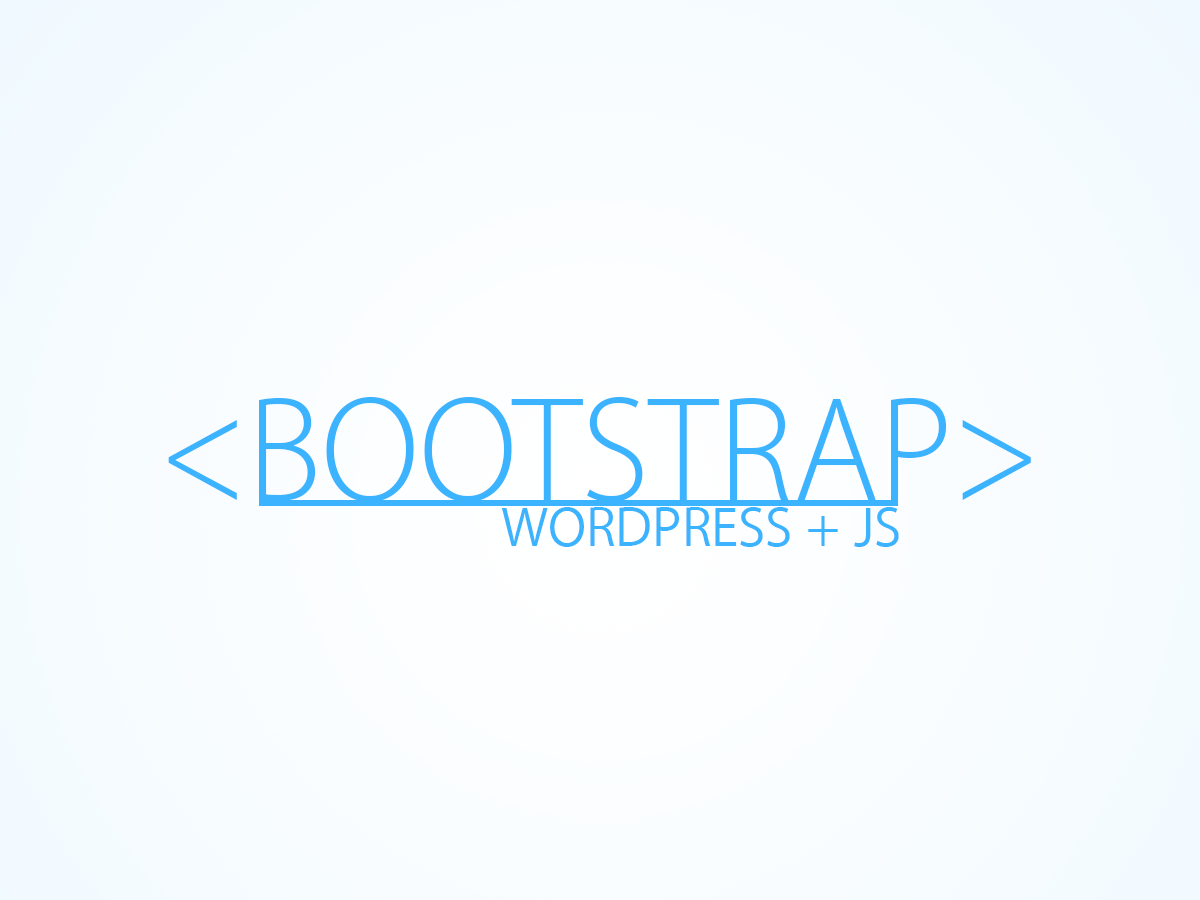
<style>
.page{position:relative;width:1200px;height:900px}
.page>*{position:absolute;margin:0}
.t1{font:150px "MyriadSet-Thin";color:#3bb3ff}
.t2{font:57px "MyriadSet-Text";color:#3bb3ff}
</style>
<div class="page">
<p class="t1" style="left:168px;top:397px;width:863px;height:105px">&lt;BOOTSTRAP&gt;</p>
<p class="t2" style="left:501px;top:507px;width:398px;height:40px">WORDPRESS + JS</p>
</div>
